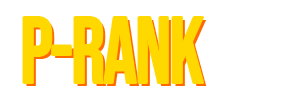
<style>
.page{position:relative;width:300px;height:100px;background:#ffffff}
.page>*{position:absolute;margin:0}
.t1{font:94.4px "BebasNeue-Regular";letter-spacing:-0.025em;color:#ffd800;scale:0.9 1}
</style>
<div class="page">
<p class="t1" style="left:23px;top:17px;width:181px;height:66px">P-rank</p>
</div>
